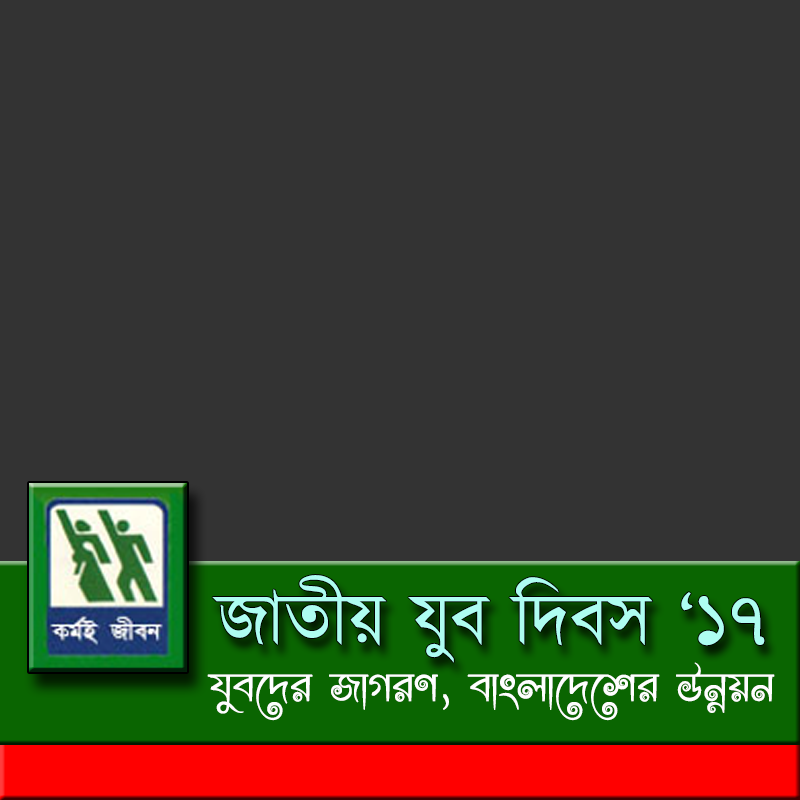
<style>
.page{position:relative;width:800px;height:800px;background:#333333}
.page>*{position:absolute;margin:0}
.t1{font:74.1px "Kalpurush";color:#aefdf1}
.t2{font:52.9px "RajonShoily";color:#fefefe}
</style>
<div class="page">
<p class="t1" style="left:212px;top:575px;width:553px;height:88px">জাতীয় যুব দিবস ‘১৭</p>
<p class="t2" style="left:207px;top:662px;width:568px;height:59px">hye‡`i RvMiY, evsjv‡`‡ki Dbœqb</p>
</div>
